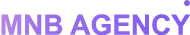
<style>
.page{position:relative;width:190px;height:35px;background:#ffffff}
.page>*{position:absolute;margin:0}
.t1{font:28px "Arial-BoldMT";color:#916aec}
</style>
<div class="page">
<p class="t1" style="left:1px;top:14px;width:190px;height:22px">MNB AGENCY</p>
</div>
